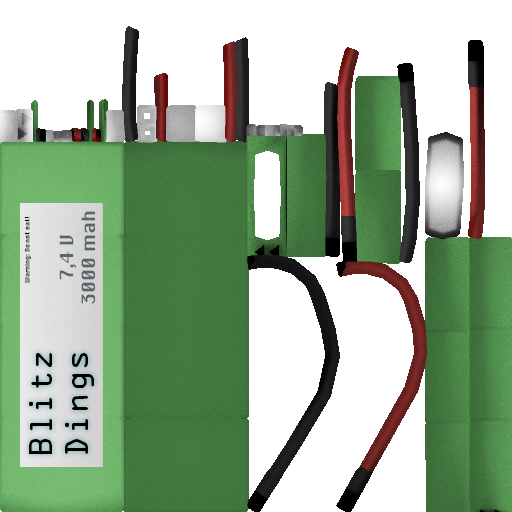
<style>
.page{position:relative;width:512px;height:512px;background:#ffffff}
.page>*{position:absolute;margin:0}
.t1{font:6px "Silom";color:#000000}
.t2{font:18px "Silom";color:#58696a}
.t3{font:29.9px "OCRAStd";color:#000000}
</style>
<div class="page">
<p class="t1" style="left:24px;top:216px;width:8px;height:67px;rotate:-90deg">Warning: Do not eat!</p>
<p class="t2" style="left:59px;top:211px;width:36px;height:93px;text-align:center;rotate:-90deg">7,4 V<br>3000 mah</p>
<p class="t3" style="left:29px;top:353px;width:65px;height:101px;text-align:center;rotate:-90deg">Blitz<br>Dings</p>
</div>
